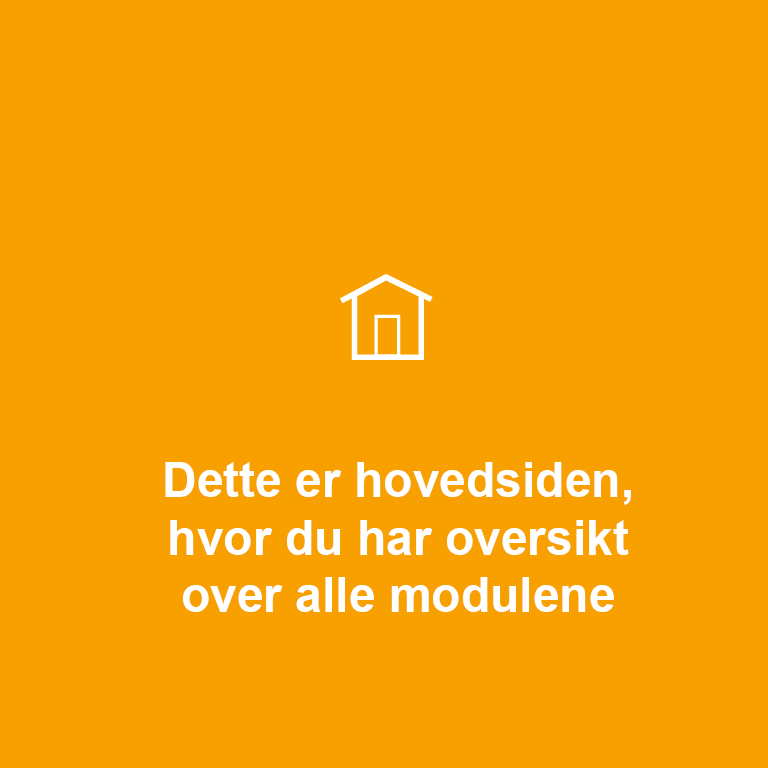
<style>
.page{position:relative;width:768px;height:768px;background:#f7a000}
.page>*{position:absolute;margin:0}
.t1{font:48px "Arial-BoldMT";color:#ffffff}
</style>
<div class="page">
<p class="t1" style="left:165px;top:462px;width:466px;height:150px;text-align:center">Dette er hovedsiden, hvor du har oversikt over alle modulene</p>
</div>
